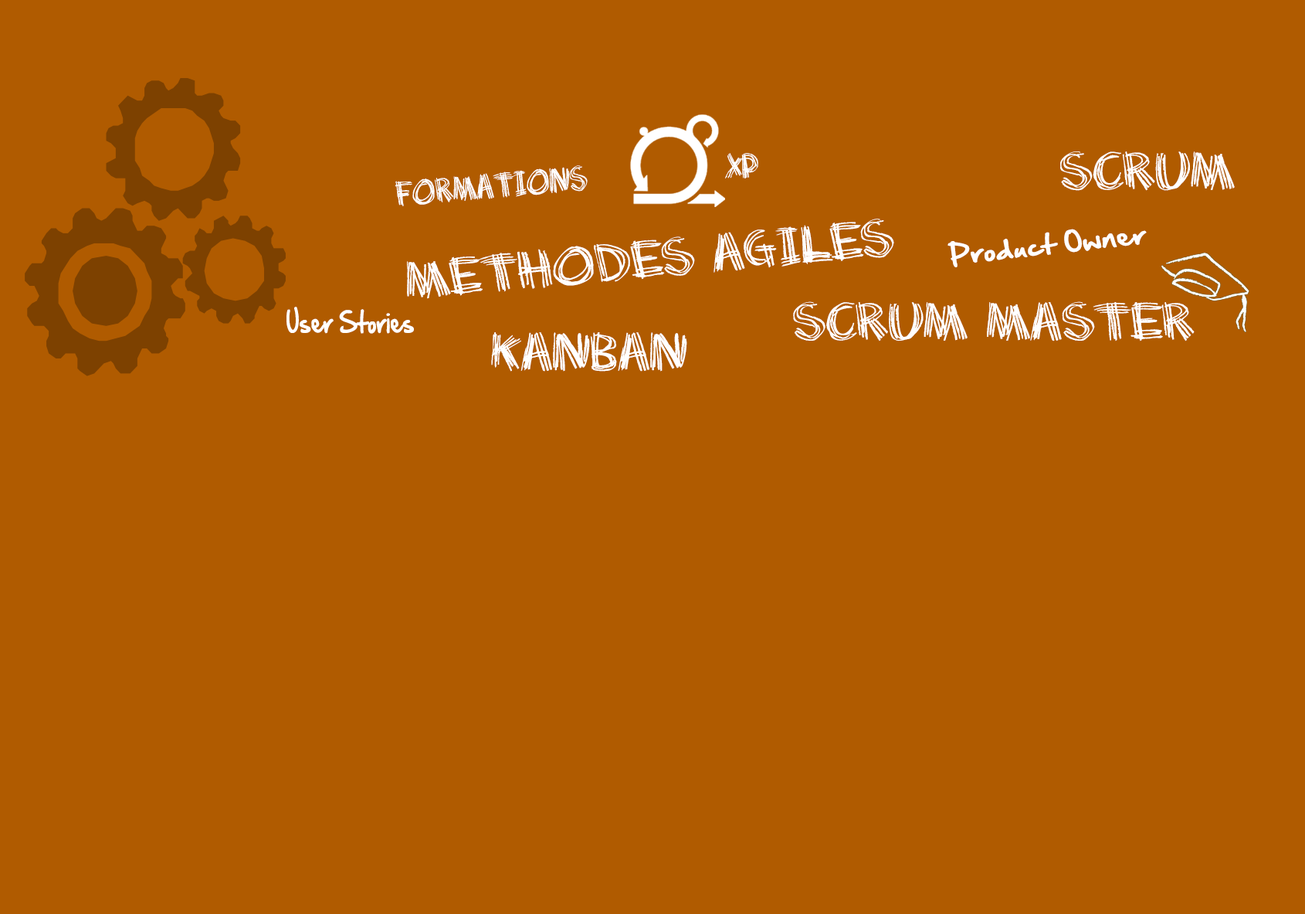
<style>
.page{position:relative;width:1305px;height:914px;background:#b05b00}
.page>*{position:absolute;margin:0}
.t1{font:25.3px "Scratchmyback";color:#ffffff;scale:0.82 1}
.t2{font:38.6px "Scratchmyback";color:#ffffff}
.t3{font:6.1px "Scratchmyback";color:#ffffff;scale:0.82 1}
.t4{font:23.5px "HandOfSean";color:#ffffff;scale:1.2 1}
.t5{font:25.3px "HandOfSean";color:#ffffff;scale:0.82 1}
</style>
<div class="page">
<p class="t1" style="left:725px;top:153px;width:33px;height:25px">XP</p>
<p class="t2" style="left:1060px;top:151px;width:175px;height:40px">SCRUM</p>
<p class="t3" style="left:395px;top:165px;width:193px;height:41px;rotate:-5deg">Formations</p>
<p class="t2" style="left:407px;top:219px;width:487px;height:80px;rotate:-5deg">Methodes agiles</p>
<p class="t4" style="left:948px;top:229px;width:199px;height:38px;rotate:-6deg">Product Owner</p>
<p class="t2" style="left:793px;top:301px;width:402px;height:40px">Scrum Master</p>
<p class="t5" style="left:287px;top:307px;width:127px;height:27px">User Stories</p>
<p class="t2" style="left:491px;top:332px;width:196px;height:39px">Kanban</p>
</div>
